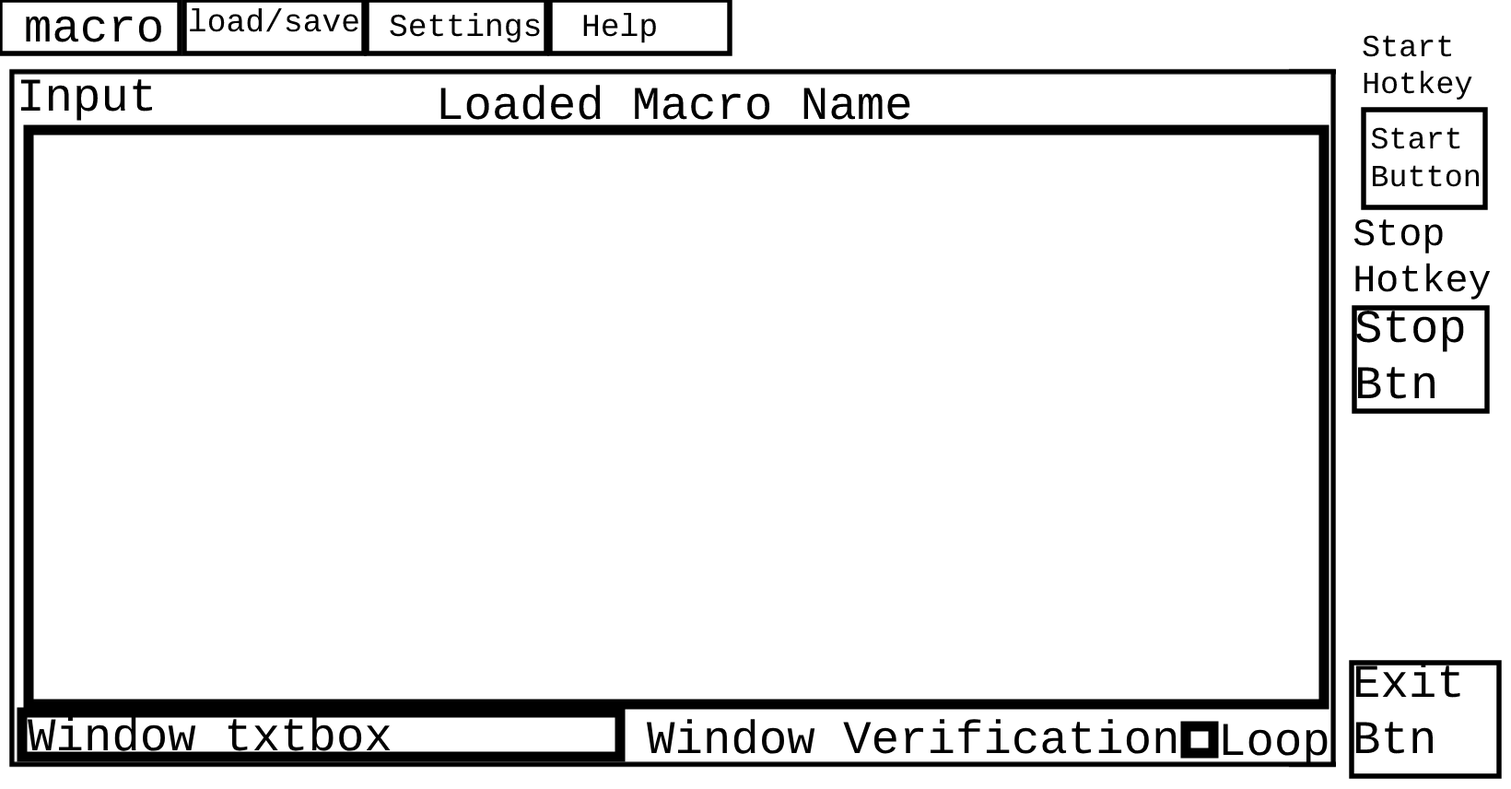
<style>
.page{position:relative;width:1511px;height:789px;background:#ffffff}
.page>*{position:absolute;margin:0}
.t1{font:46.8px "LiberationMono";color:#000000}
.t2{font:31.9px "LiberationMono";color:#000000}
.t3{font:30.9px "LiberationMono";color:#000000}
.t4{font:38.5px "LiberationMono";color:#000000}
</style>
<div class="page">
<p class="t1" style="left:26px;top:16px;width:135px;height:26px">macro</p>
<p class="t2" style="left:190px;top:8px;width:169px;height:24px">load/save</p>
<p class="t2" style="left:390px;top:12px;width:150px;height:31px">Settings</p>
<p class="t2" style="left:583px;top:12px;width:73px;height:31px">Help</p>
<p class="t3" style="left:1363px;top:35px;width:110px;height:65px">Start<br>Hotkey</p>
<p class="t1" style="left:21px;top:79px;width:132px;height:42px">Input</p>
<p class="t1" style="left:441px;top:85px;width:470px;height:35px">Loaded Macro Name</p>
<p class="t3" style="left:1371px;top:127px;width:108px;height:60px">Start<br>Button</p>
<p class="t4" style="left:1354px;top:219px;width:136px;height:81px">Stop<br>Hotkey</p>
<p class="t1" style="left:1356px;top:311px;width:108px;height:88px">Stop<br>Btn</p>
<p class="t1" style="left:1357px;top:663px;width:104px;height:91px">Exit<br>Btn</p>
<p class="t1" style="left:28px;top:716px;width:363px;height:35px">Window txtbox</p>
<p class="t1" style="left:647px;top:719px;width:530px;height:35px">Window Verification</p>
<p class="t1" style="left:1223px;top:723px;width:105px;height:42px">Loop</p>
</div>
